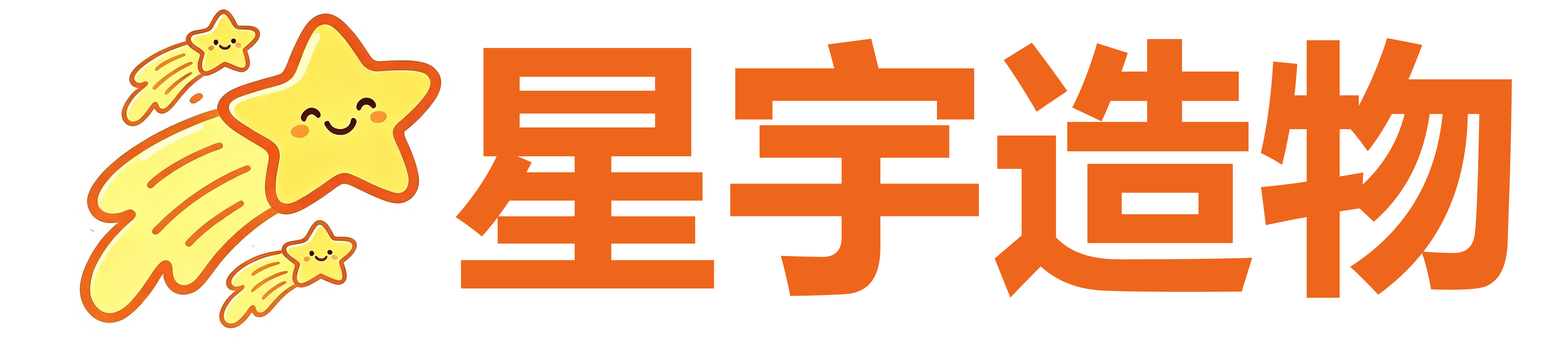
<style>
.page{position:relative;width:1568px;height:362px;background:#ffffff}
.page>*{position:absolute;margin:0}
.t1{font:268.4px "MicrosoftYaHei-Bold";color:#ee661c}
</style>
<div class="page">
<p class="t1" style="left:456px;top:38px;width:1056px;height:260px">星宇造物</p>
</div>
